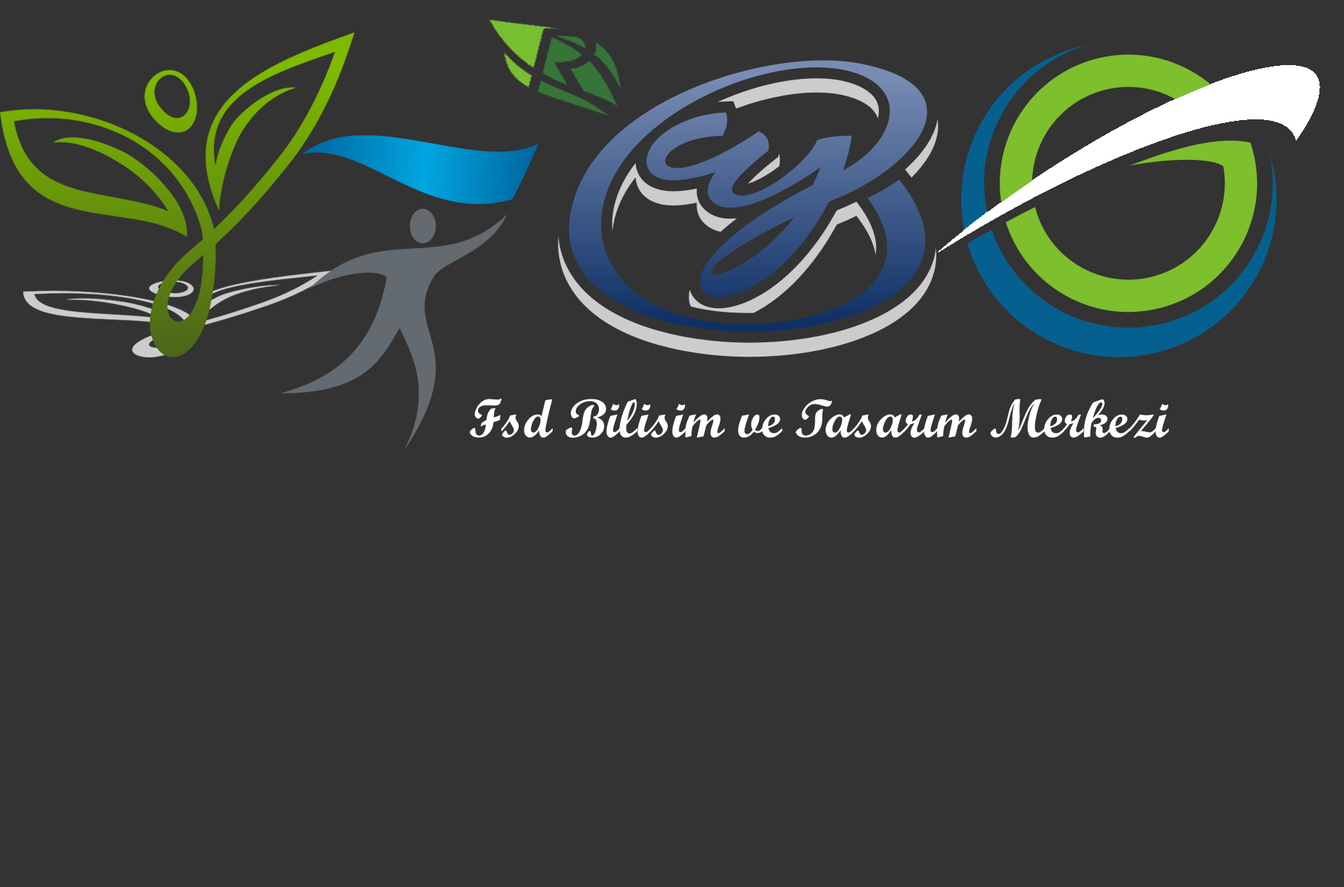
<style>
.page{position:relative;width:1344px;height:887px;background:#333333}
.page>*{position:absolute;margin:0}
.t1{font:54.2px "ScriptMTBold";color:#ffffff}
</style>
<div class="page">
<p class="t1" style="left:470px;top:399px;width:699px;height:39px">Fsd Bilisim ve Tasarım Merkezi</p>
</div>
